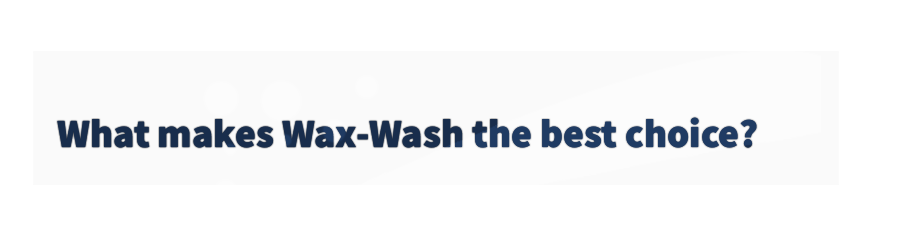
<style>
.page{position:relative;width:900px;height:250px;background:#ffffff}
.page>*{position:absolute;margin:0}
.t1{font:40px "SourceSansRoman-Black"}
</style>
<div class="page">
<p class="t1" style="left:57px;top:117px;width:700px;height:31px">What makes Wax-Wash the best choice?</p>
</div>
